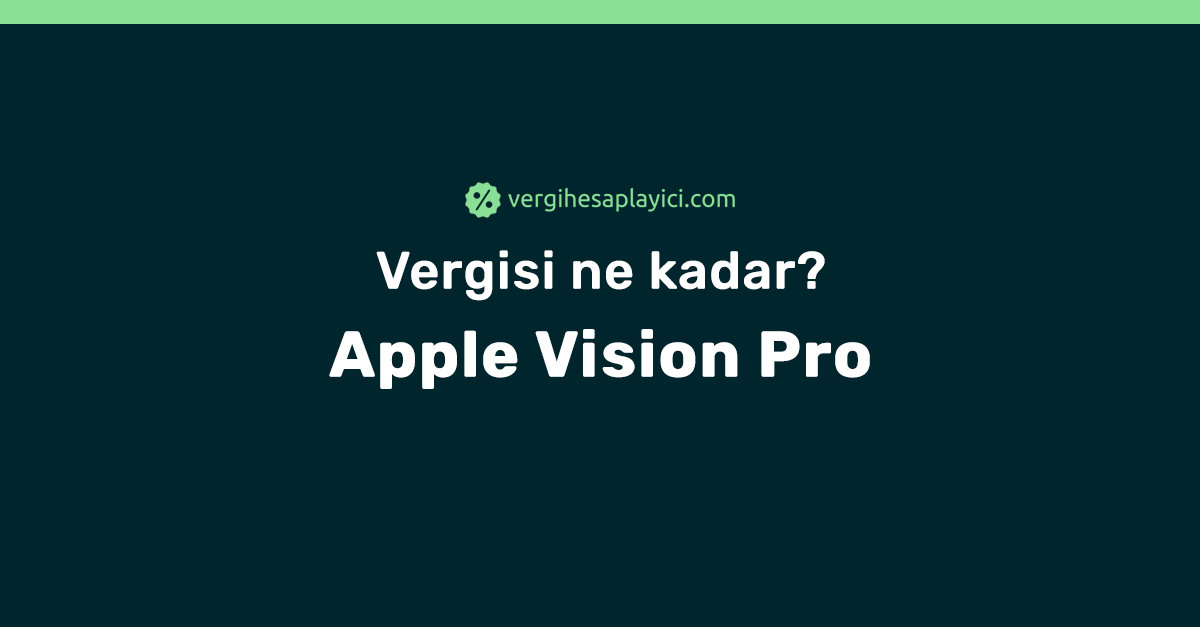
<style>
.page{position:relative;width:1200px;height:627px;background:#01252c}
.page>*{position:absolute;margin:0}
.t1{font:52px/88px "Rubik-Medium";color:#ffffff;font-weight:bold}
.t2{font:64px/88px "Rubik-Bold";color:#ffffff;font-weight:bold}
</style>
<div class="page">
<p class="t1" style="left:329px;top:250px;width:541px;height:139px;text-align:center">Vergisi ne kadar?<br><span class="t2">Apple Vision Pro</span></p>
</div>
